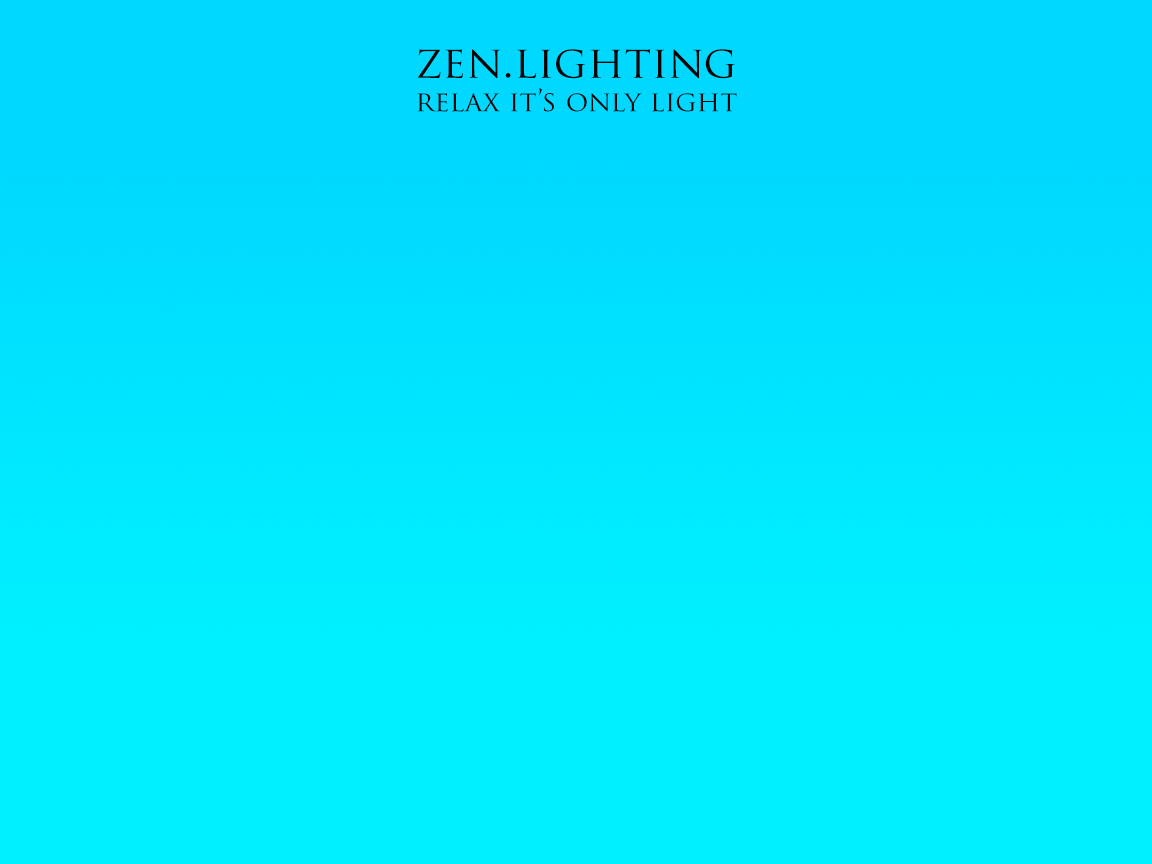
<style>
.page{position:relative;width:1152px;height:864px;background:#00f0ff}
.page>*{position:absolute;margin:0}
.t1{font:28px "TrajanPro-Regular";color:#050505}
.t2{font:44px "TrajanPro-Regular";color:#050505}
</style>
<div class="page">
<p class="t1" style="left:417px;top:49px;width:320px;height:63px;text-align:center"><span class="t2">zen.lighting<br></span>relax it’s only light</p>
</div>
